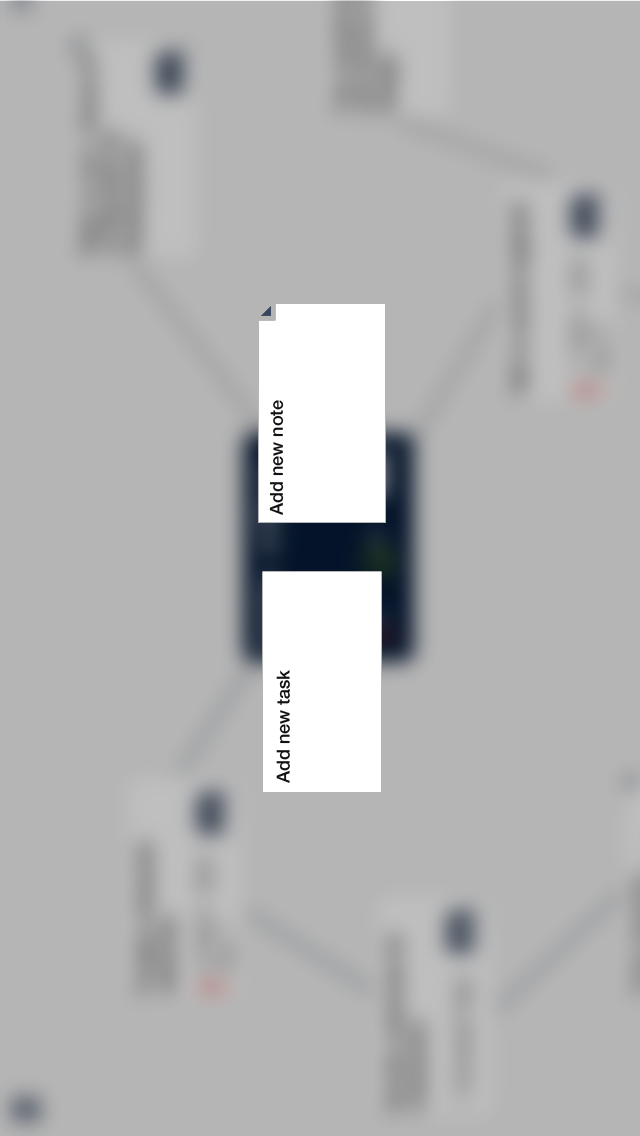
<style>
.page{position:relative;width:640px;height:1136px;background:#b5b5b5}
.page>*{position:absolute;margin:0}
.t1{font:18px "HelveticaNeue-Medium";color:#111111}
</style>
<div class="page">
<p class="t1" style="left:269px;top:400px;width:15px;height:115px;rotate:-90deg">Add new note</p>
<p class="t1" style="left:276px;top:670px;width:14px;height:113px;rotate:-90deg">Add new task</p>
</div>
